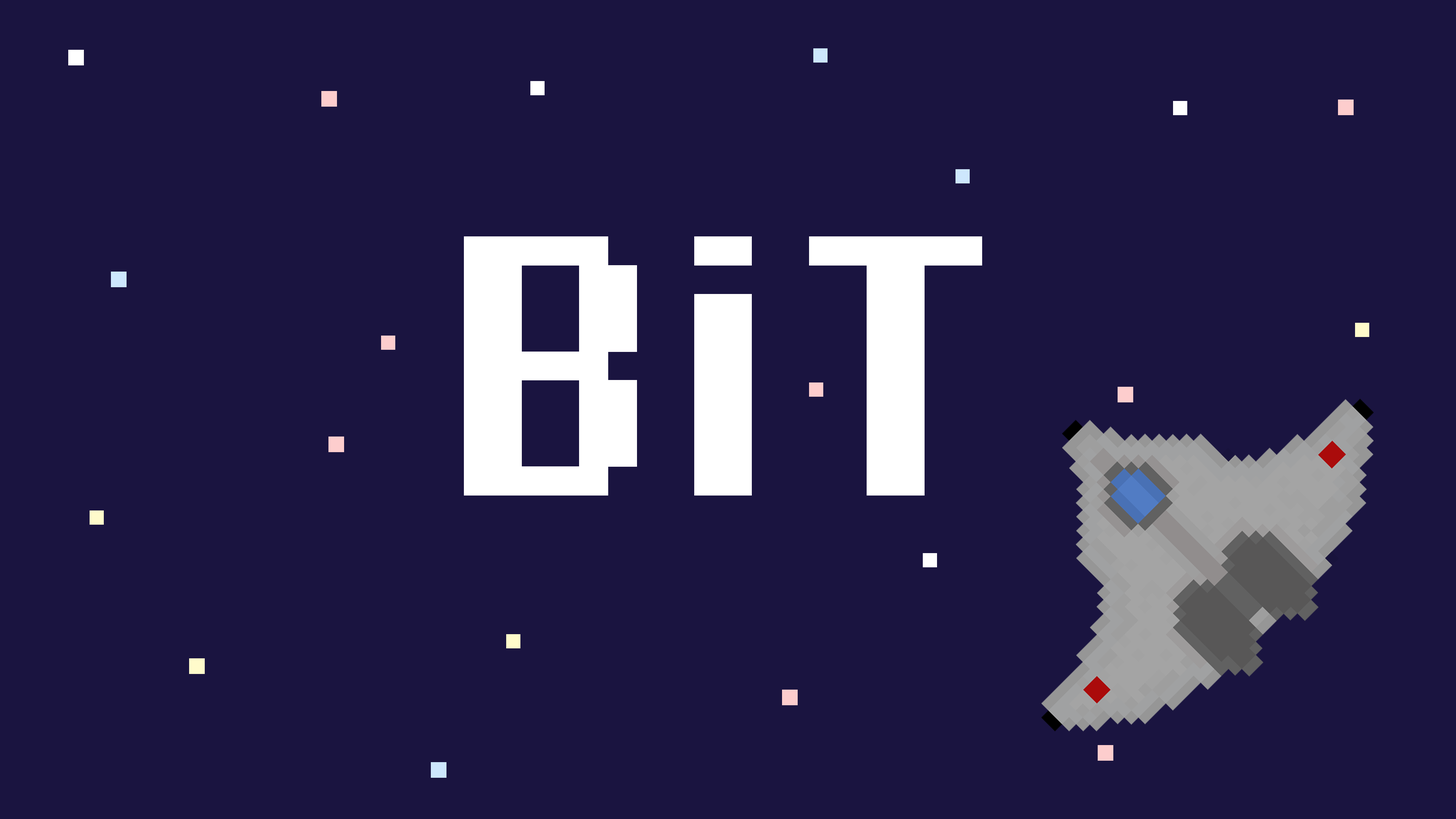
<style>
.page{position:relative;width:1456px;height:819px;background:#1a1440}
.page>*{position:absolute;margin:0}
.t1{font:460.3px "PixelOperator-Bold";color:#ffffff}
</style>
<div class="page">
<p class="t1" style="left:464px;top:236px;width:518px;height:260px">BiT</p>
</div>
